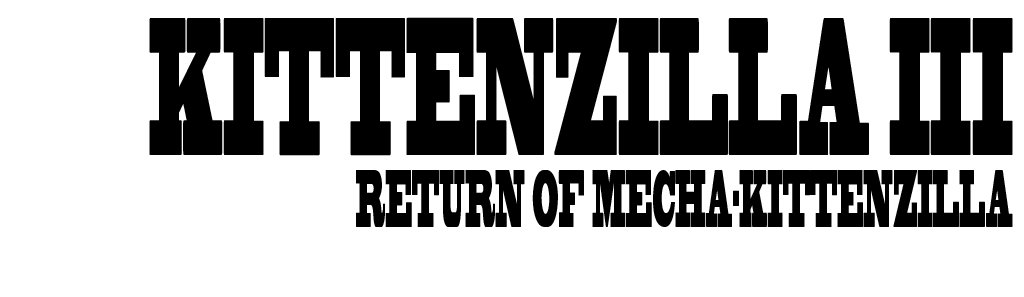
<style>
.page{position:relative;width:1024px;height:297px;background:#ffffff}
.page>*{position:absolute;margin:0}
.t1{font:183px "BlackoakStd";color:#000000;scale:0.21 1}
.t2{font:75.6px "BlackoakStd";color:#000000;scale:0.2 1}
</style>
<div class="page">
<p class="t1" style="left:149px;top:17px;width:864px;height:139px">KITTENZILLA III</p>
<p class="t2" style="left:356px;top:170px;width:657px;height:57px">RETURN OF MECHA-KITTENZILLA</p>
</div>
